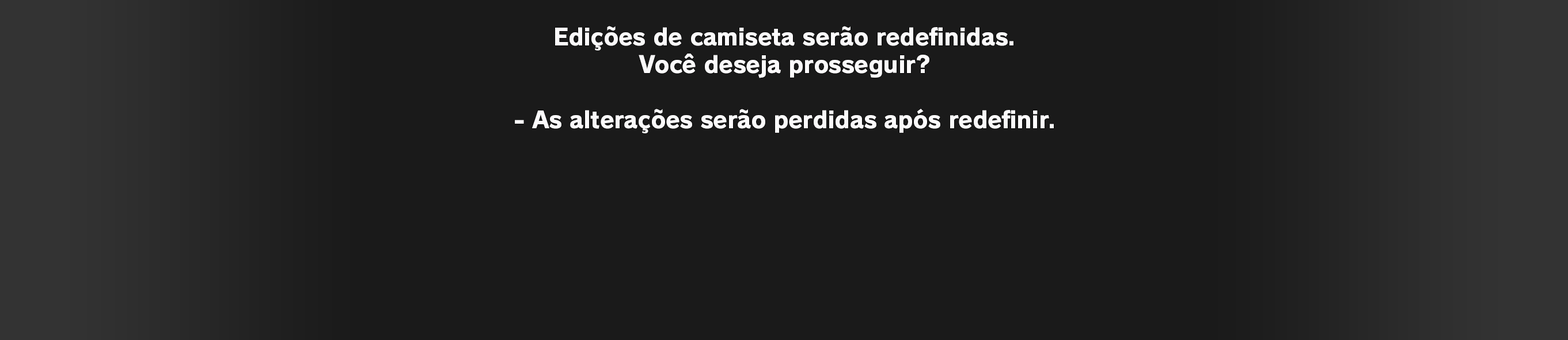
<style>
.page{position:relative;width:1568px;height:340px;background:#1a1a1a}
.page>*{position:absolute;margin:0}
.t1{font:23px "RodinPro-EB";letter-spacing:-0.015em;color:#fbfafb}
</style>
<div class="page">
<p class="t1" style="left:555px;top:26px;width:458px;height:25px">Edições de camiseta serão redefinidas.</p>
<p class="t1" style="left:639px;top:54px;width:290px;height:24px">Você deseja prosseguir?</p>
<p class="t1" style="left:515px;top:109px;width:539px;height:25px">- As alterações serão perdidas após redefinir.</p>
</div>
